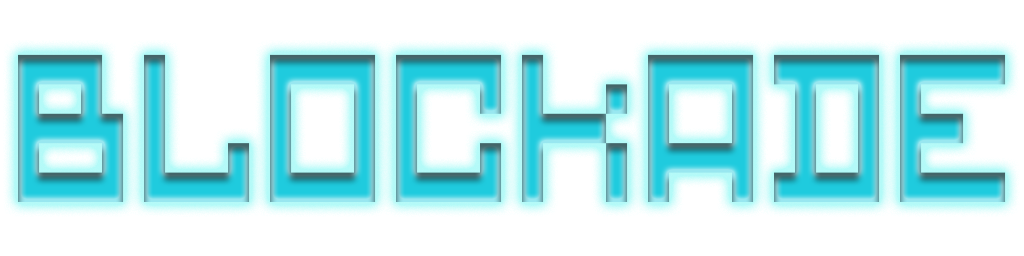
<style>
.page{position:relative;width:1024px;height:256px;background:#ffffff}
.page>*{position:absolute;margin:0}
.t1{font:235.3px "BIGBLOCKS";scale:0.71 1}
</style>
<div class="page">
<p class="t1" style="left:18px;top:54px;width:988px;height:148px">BLOCKADE</p>
</div>
